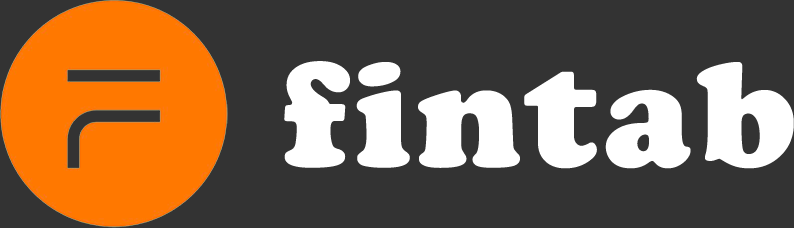
<style>
.page{position:relative;width:794px;height:228px;background:#333333}
.page>*{position:absolute;margin:0}
.t1{font:155.5px "CooperBlack";letter-spacing:0.005em;color:#ffffff;font-weight:bold}
</style>
<div class="page">
<p class="t1" style="left:284px;top:61px;width:510px;height:108px">fintab</p>
</div>
